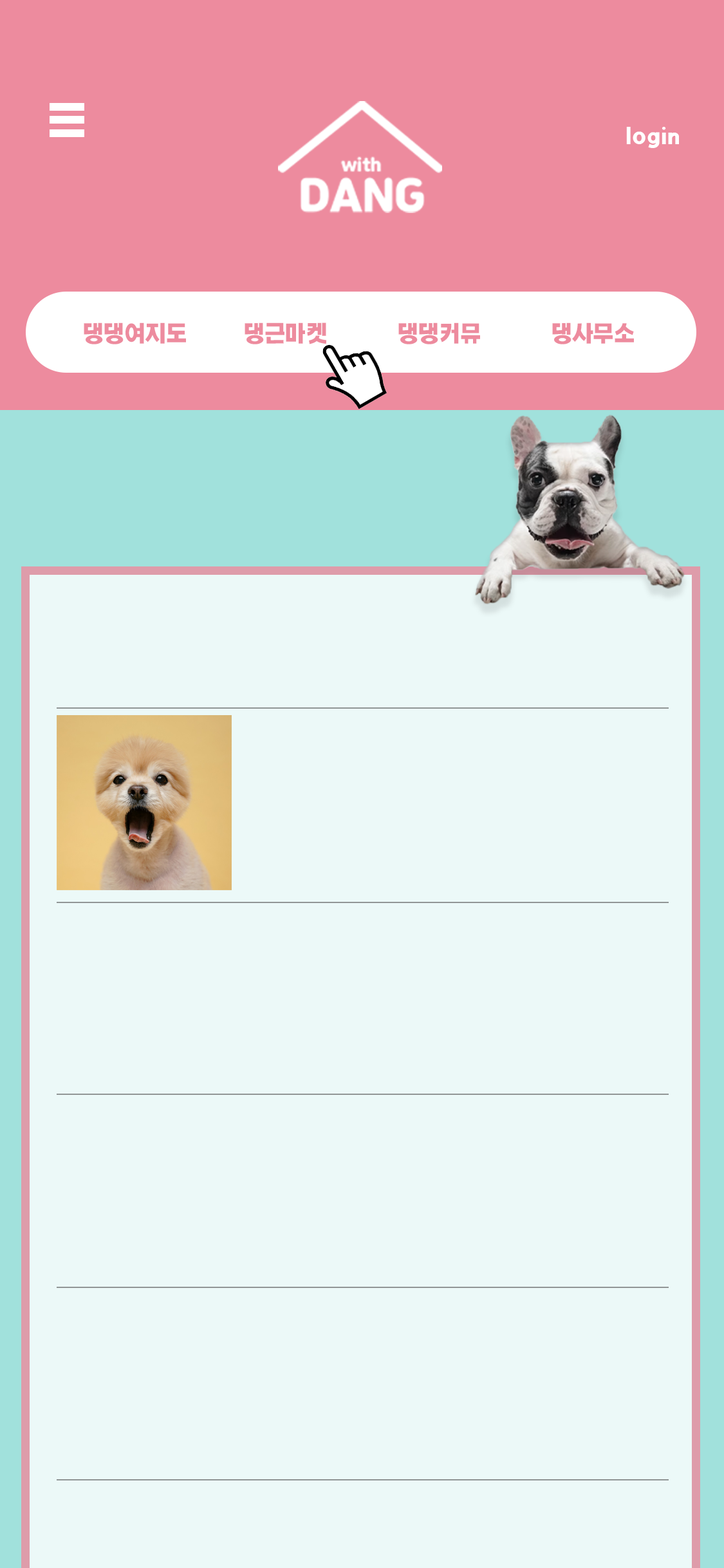
<style>
.page{position:relative;width:724px;height:1568px;background:#ecf9f8}
.page>*{position:absolute;margin:0}
.t1{font:21.2px "KOTRA_BOLD-Bold";color:#ffffff}
.t2{font:21.2px "KOTRA_BOLD-Bold";color:#ed8b9e}
</style>
<div class="page">
<p class="t1" style="left:626px;top:127px;width:53px;height:21px">login</p>
<p class="t2" style="left:84px;top:322px;width:102px;height:22px">댕댕여지도</p>
<p class="t2" style="left:245px;top:322px;width:82px;height:22px">댕근마켓</p>
<p class="t2" style="left:398px;top:322px;width:82px;height:22px">댕댕커뮤</p>
<p class="t2" style="left:552px;top:322px;width:82px;height:22px">댕사무소</p>
</div>
